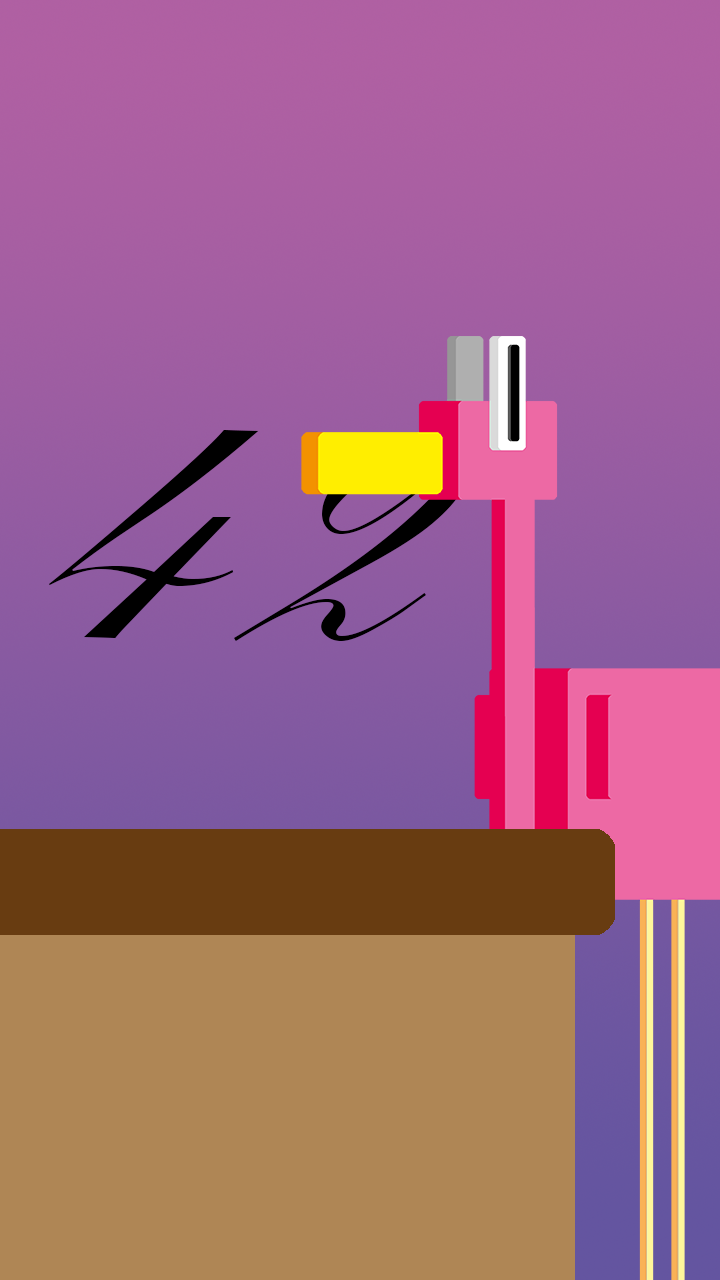
<style>
.page{position:relative;width:720px;height:1280px;background:#af8655}
.page>*{position:absolute;margin:0}
.t1{font:612.7px "KunstlerScript";color:#000000}
</style>
<div class="page">
<p class="t1" style="left:49px;top:430px;width:421px;height:211px">42</p>
</div>
